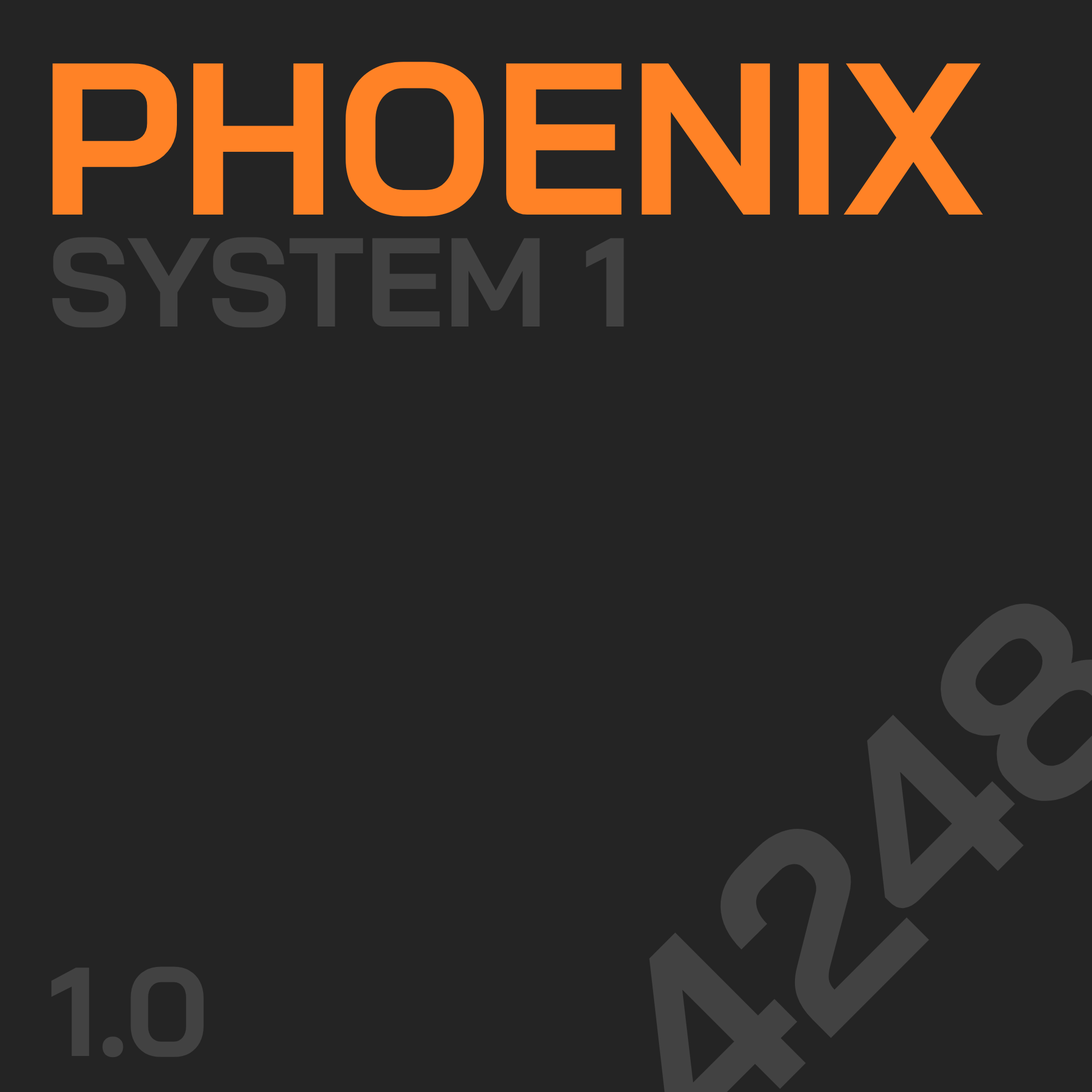
<style>
.page{position:relative;width:1092px;height:1092px;background:#242424}
.page>*{position:absolute;margin:0}
.t1{font:215.8px "BaiJamjuree-Bold";color:#ff8226}
.t2{font:126.1px "BaiJamjuree-Bold";color:#424242}
</style>
<div class="page">
<p class="t1" style="left:52px;top:62px;width:931px;height:155px">PHOENIX</p>
<p class="t2" style="left:52px;top:237px;width:572px;height:91px">SYSTEM 1</p>
<p class="t2" style="left:51px;top:966px;width:153px;height:92px">1.0</p>
</div>
